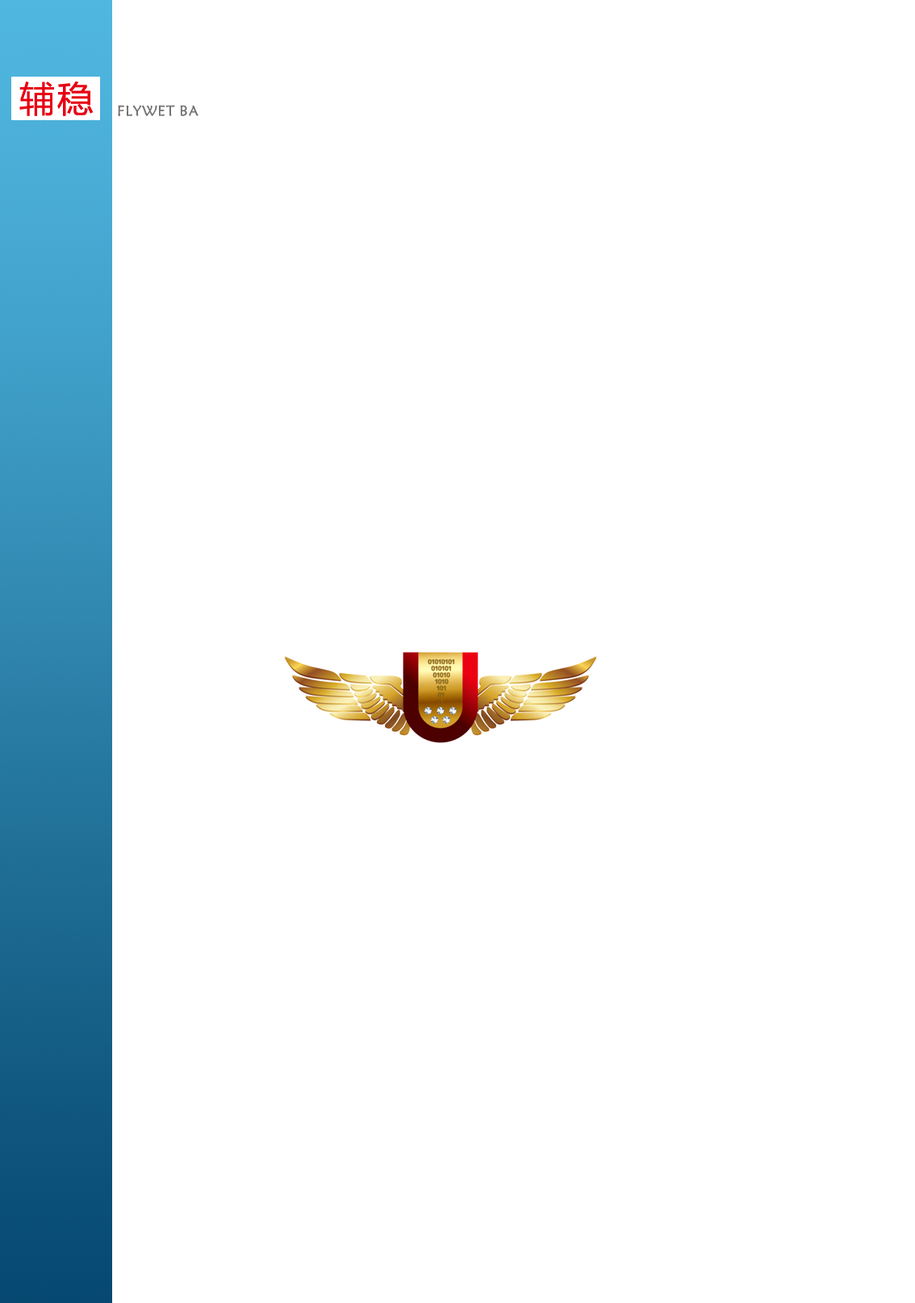
<style>
.page{position:relative;width:915px;height:1303px;background:#ffffff}
.page>*{position:absolute;margin:0}
.t1{font:35.5px "MicrosoftYaHei";letter-spacing:0.075em;color:#e70012}
.t2{font:14.5px "STXinwei";letter-spacing:0.05em;color:#727071}
</style>
<div class="page">
<p class="t1" style="left:19px;top:81px;width:75px;height:35px">辅稳</p>
<p class="t2" style="left:118px;top:105px;width:80px;height:11px">FLYWET BA</p>
</div>
